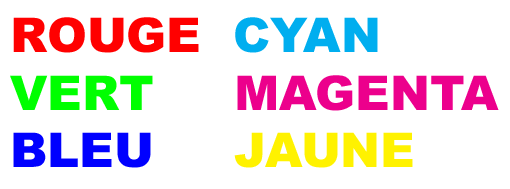
<style>
.page{position:relative;width:510px;height:189px;background:#ffffff}
.page>*{position:absolute;margin:0}
.t1{font:48px "Arial-Black";color:#ec008c}
.t2{font:48px "Arial-Black";color:#ff0000}
.t3{font:48px "Arial-Black";color:#00aeef}
.t4{font:48px "Arial-Black";color:#00ff00}
.t5{font:48px "Arial-Black";color:#0000ff}
.t6{font:48px "Arial-Black";color:#fff200}
</style>
<div class="page">
<p class="t1" style="left:10px;top:17px;width:489px;height:151px"><span class="t2">ROUGE  </span><span class="t3">CYAN<br></span><span class="t4">VERT     </span>MAGENTA<br><span class="t5">BLEU     </span><span class="t6">JAUNE</span></p>
</div>
